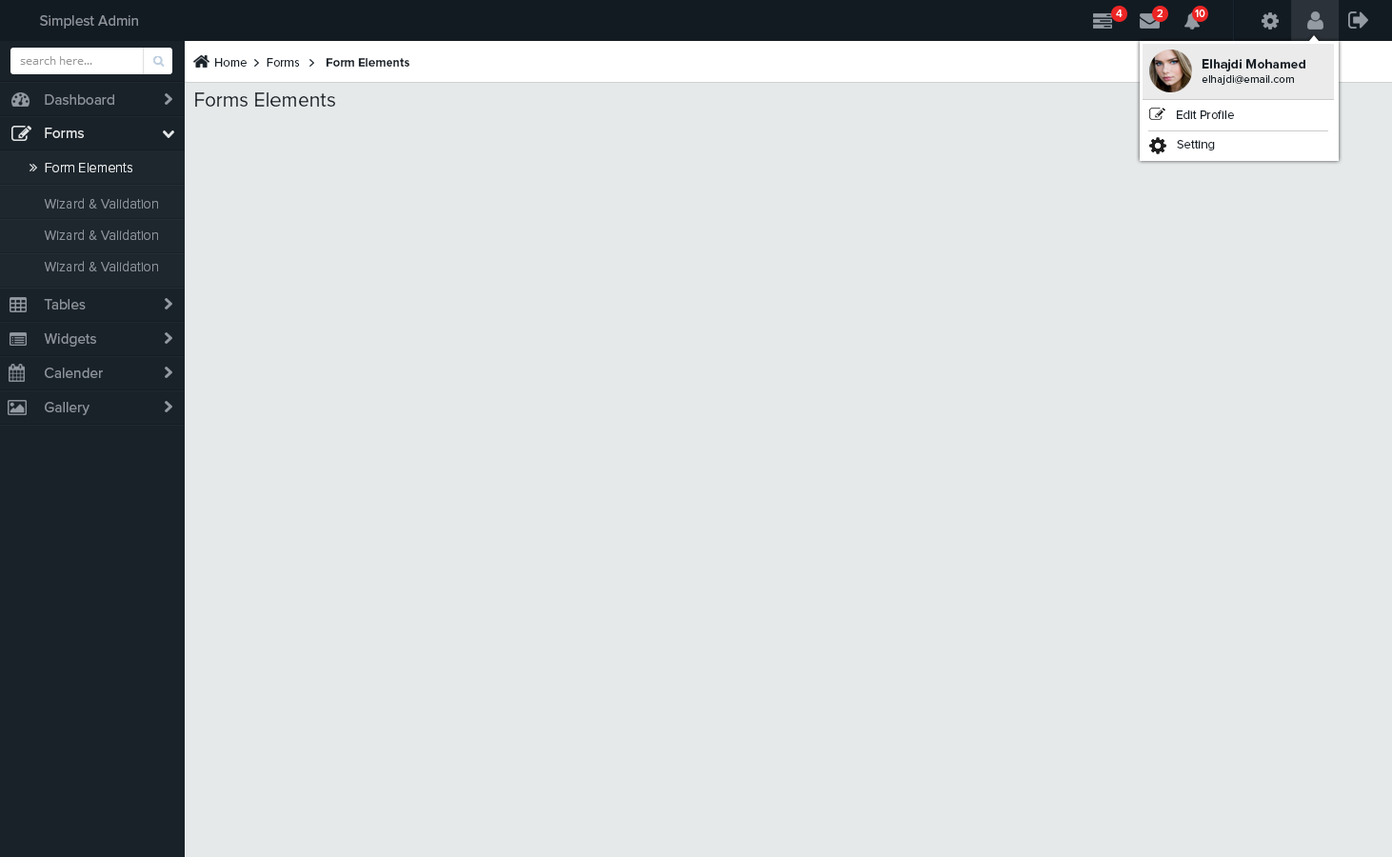
<style>
.page{position:relative;width:1392px;height:857px;background:#e6e9ea}
.page>*{position:absolute;margin:0}
.t1{font:15.2px "ProximaNova-Regular";color:#8d939a;scale:0.96 1}
.t2{font:10.9px "ProximaNova-Regular";color:#ffffff}
.t3{font:12.4px "ProximaNova-Regular";color:#1a2229}
.t4{font:12.4px "ProximaNova-Bold";color:#1a2229}
.t5{font:13.3px "ProximaNova-Bold";color:#1a2229}
.t6{font:11.4px "ProximaNova-Regular";color:#1a2229}
.t7{font:20.3px "ProximaNova-Regular";color:#1a2229}
.t8{font:15.2px "ProximaNova-Regular";color:#e6e9ea;scale:0.96 1}
.t9{font:14.3px "ProximaNova-Light";color:#e6e9ea;scale:0.96 1}
.t10{font:14.3px "ProximaNova-Light";color:#8d939a;scale:0.96 1}
</style>
<div class="page">
<p class="t1" style="left:40px;top:15px;width:98px;height:14px">Simplest Admin</p>
<p class="t2" style="left:1116px;top:10px;width:6px;height:7px">4</p>
<p class="t2" style="left:1157px;top:10px;width:5px;height:7px">2</p>
<p class="t2" style="left:1195px;top:10px;width:10px;height:7px">10</p>
<p class="t3" style="left:215px;top:58px;width:194px;height:9px">Home      Forms        <span class="t4">Form Elements</span></p>
<p class="t5" style="left:1201px;top:59px;width:104px;height:12px">Elhajdi Mohamed</p>
<p class="t6" style="left:1201px;top:75px;width:93px;height:10px">elhajdi@email.com</p>
<p class="t1" style="left:45px;top:94px;width:69px;height:11px">Dashboard</p>
<p class="t7" style="left:195px;top:92px;width:140px;height:15px">Forms Elements</p>
<p class="t3" style="left:1177px;top:109px;width:57px;height:10px">Edit Profile</p>
<p class="t8" style="left:45px;top:128px;width:39px;height:10px">Forms</p>
<p class="t3" style="left:1177px;top:140px;width:38px;height:10px">Setting</p>
<p class="t9" style="left:45px;top:163px;width:87px;height:9px">Form Elements</p>
<p class="t10" style="left:44px;top:198px;width:114px;height:10px">Wizard &amp; Validation</p>
<p class="t10" style="left:44px;top:229px;width:114px;height:11px">Wizard &amp; Validation</p>
<p class="t10" style="left:44px;top:261px;width:114px;height:10px">Wizard &amp; Validation</p>
<p class="t1" style="left:44px;top:299px;width:42px;height:10px">Tables</p>
<p class="t1" style="left:44px;top:333px;width:52px;height:14px">Widgets</p>
<p class="t1" style="left:45px;top:367px;width:58px;height:11px">Calender</p>
<p class="t1" style="left:45px;top:402px;width:44px;height:13px">Gallery</p>
</div>
